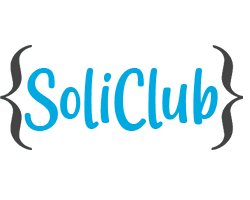
<style>
.page{position:relative;width:250px;height:200px;background:#ffffff}
.page>*{position:absolute;margin:0}
.t1{font:75px "LadyNature";color:#00a9e0}
</style>
<div class="page">
<p class="t1" style="left:24px;top:68px;width:194px;height:63px">SoliClub</p>
</div>
